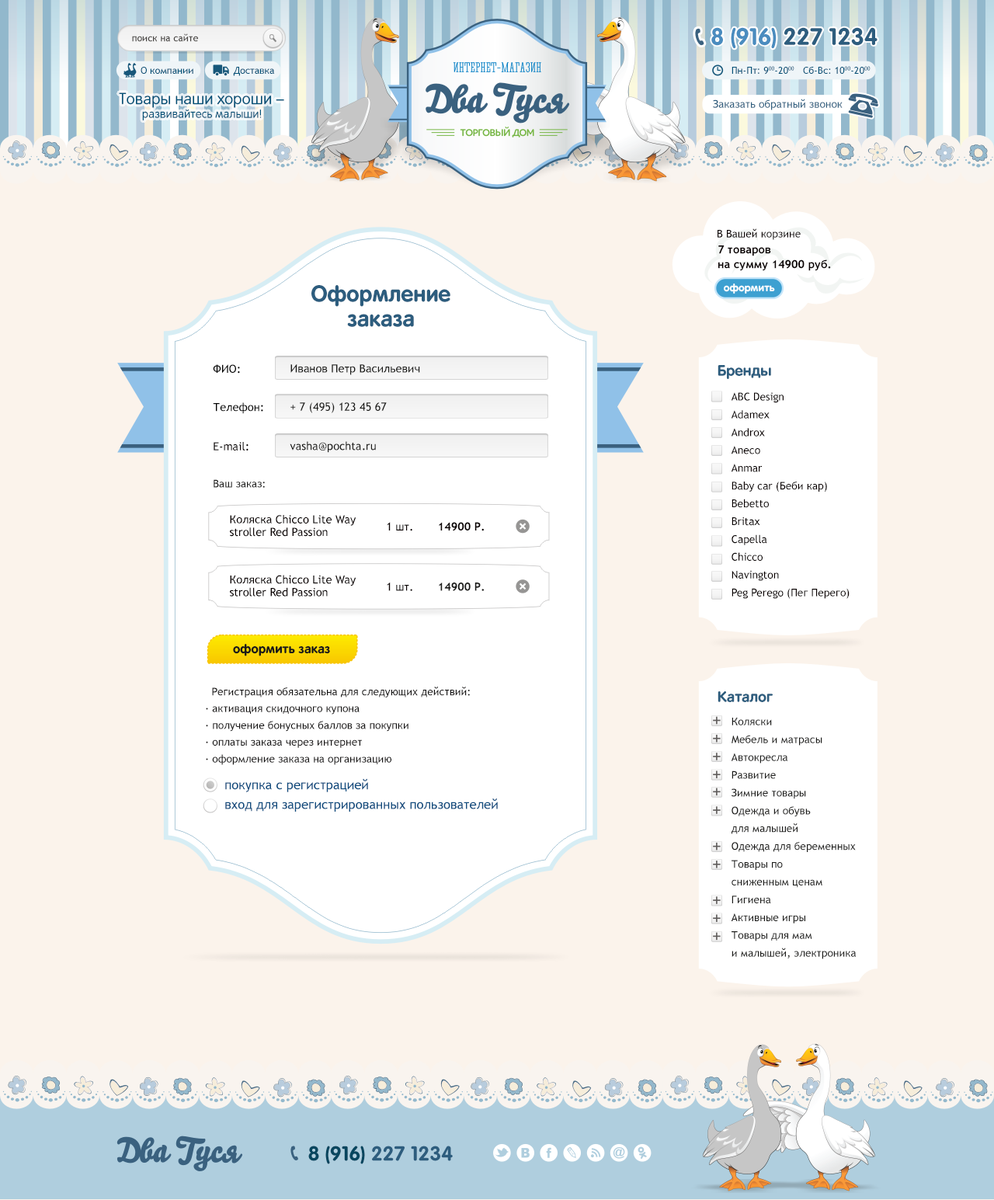
<style>
.page{position:relative;width:994px;height:1200px;background:#fbf3eb}
.page>*{position:absolute;margin:0}
.t1{font:23.4px "RotondaC-Bold";color:#2d5d7e}
.t2{font:23.4px "RotondaC-Bold";color:#4a8cbf}
.t3{font:9.6px "TrebuchetMS";color:#454240}
.t4{font:9.7px "TrebuchetMS";color:#005177}
.t5{font:16.1px "RotondaC";color:#005177}
.t6{font:10.7px "TrebuchetMS";color:#2d5d7e}
.t7{font:11.7px "RotondaC";color:#005177}
.t8{font:10.7px "TrebuchetMS";color:#090000}
.t9{font:11.3px "TrebuchetMS-Bold";color:#090000}
.t10{font:22.6px "RotondaC-Bold";color:#2d5d7e}
.t11{font:10.7px "RotondaC-Bold";color:#ffffff}
.t12{font:11.3px "TrebuchetMS";color:#000000}
.t13{font:11.3px "TrebuchetMS";color:#1a1a18}
.t14{font:15.1px "RotondaC-Bold";color:#2d5d7e}
.t15{font:10.7px/17.8px "TrebuchetMS";color:#090000}
.t16{font:11.3px "TrebuchetMS";color:#090000}
.t17{font:10.7px "TrebuchetMS";color:#1a1a18}
.t18{font:11.3px/12.6px "TrebuchetMS";color:#090000}
.t19{font:11.3px "TrebuchetMS-Bold";color:#1a1a18}
.t20{font:12.9px "RotondaC-Bold";color:#1a1a18}
.t21{font:10.7px/16.8px "TrebuchetMS";color:#111010}
.t22{font:10.7px/17.8px "TrebuchetMS";color:#1a1a18}
.t23{font:12.9px "TrebuchetMS";color:#114d7f}
.t24{font:20.3px "RotondaC-Bold";color:#2d5d7e}
.t25{font:20.3px "RotondaC-Bold";color:#06465f}
</style>
<div class="page">
<p class="t1" style="left:711px;top:27px;width:166px;height:22px"><span class="t2">8 (916)</span> 227 1234</p>
<p class="t3" style="left:132px;top:33px;width:66px;height:9px">поиск на сайте</p>
<p class="t4" style="left:141px;top:67px;width:52px;height:7px">О компании</p>
<p class="t4" style="left:233px;top:67px;width:41px;height:9px">Доставка</p>
<p class="t4" style="left:731px;top:66px;width:139px;height:9px">Пн-Пт: 900-2000   Сб-Вс: 1000-2000</p>
<p class="t5" style="left:119px;top:92px;width:165px;height:16px">Товары наши хороши –</p>
<p class="t6" style="left:713px;top:99px;width:130px;height:11px">Заказать обратный звонок</p>
<p class="t7" style="left:142px;top:109px;width:120px;height:11px">развивайтесь малыши!</p>
<p class="t8" style="left:717px;top:228px;width:84px;height:12px">В Вашей корзине</p>
<p class="t9" style="left:718px;top:245px;width:53px;height:11px">7 товаров</p>
<p class="t9" style="left:718px;top:259px;width:113px;height:12px">на сумму 14900 руб.</p>
<p class="t10" style="left:311px;top:285px;width:139px;height:22px">Оформление</p>
<p class="t11" style="left:724px;top:283px;width:51px;height:11px">оформить</p>
<p class="t10" style="left:347px;top:314px;width:67px;height:13px">заказа</p>
<p class="t12" style="left:213px;top:364px;width:27px;height:10px">ФИО:</p>
<p class="t13" style="left:290px;top:364px;width:130px;height:11px">Иванов Петр Васильевич</p>
<p class="t14" style="left:717px;top:365px;width:54px;height:14px">Бренды</p>
<p class="t15" style="left:731px;top:392px;width:119px;height:207px">ABC Design<br>Adamex<br>Androx<br>Aneco<br>Anmar<br>Baby car (Беби кар)<br>Bebetto<br>Britax<br>Capella<br>Chicco<br>Navington<br>Peg Perego (Пег Перего)</p>
<p class="t12" style="left:213px;top:402px;width:50px;height:12px">Телефон:</p>
<p class="t13" style="left:290px;top:402px;width:97px;height:11px">+ 7 (495) 123 45 67</p>
<p class="t16" style="left:214px;top:442px;width:34px;height:8px">E-mail:</p>
<p class="t13" style="left:290px;top:441px;width:86px;height:12px">vasha@pochta.ru</p>
<p class="t17" style="left:214px;top:479px;width:51px;height:9px">Ваш заказ:</p>
<p class="t18" style="left:230px;top:515px;width:126px;height:22px">Коляска Chicco Lite Way<br>stroller Red Passion</p>
<p class="t16" style="left:387px;top:522px;width:25px;height:9px">1 шт.</p>
<p class="t9" style="left:439px;top:522px;width:45px;height:9px">14900 Р.</p>
<p class="t18" style="left:230px;top:575px;width:126px;height:21px">Коляска Chicco Lite Way<br>stroller Red Passion</p>
<p class="t16" style="left:387px;top:582px;width:25px;height:9px">1 шт.</p>
<p class="t19" style="left:439px;top:582px;width:45px;height:9px">14900 Р.</p>
<p class="t20" style="left:233px;top:644px;width:97px;height:12px">оформить заказ</p>
<p class="t21" style="left:206px;top:686px;width:264px;height:79px">Регистрация обязательна для следующих действий:<br>· активация скидочного купона<br>· получение бонусных баллов за покупки<br>· оплаты заказа через интернет<br>· оформление заказа на организацию</p>
<p class="t14" style="left:717px;top:691px;width:56px;height:11px">Каталог</p>
<p class="t22" style="left:731px;top:717px;width:125px;height:242px">Коляски<br>Мебель и матрасы<br>Автокресла<br>Развитие<br>Зимние товары<br>Одежда и обувь<br>для малышей<br>Одежда для беременных<br>Товары по<br>сниженным ценам<br>Гигиена<br>Активные игры<br>Товары для мам<br>и малышей, электроника</p>
<p class="t23" style="left:225px;top:778px;width:143px;height:14px">покупка с регистрацией</p>
<p class="t23" style="left:225px;top:798px;width:273px;height:13px">вход для зарегистрированных пользователей</p>
<p class="t24" style="left:308px;top:1145px;width:145px;height:19px"><span class="t25">8 (916)</span> 227 1234</p>
</div>
